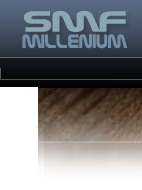
<style>
.page{position:relative;width:142px;height:190px}
.page>*{position:absolute;margin:0}
.t1{font:30.4px "Nasalization";color:#8ba7b2;scale:1.52 1}
.t2{font:20.3px "Nasalization";color:#738fa7;scale:0.91 1}
</style>
<div class="page">
<p class="t1" style="left:24px;top:11px;width:102px;height:21px">SMF</p>
<p class="t2" style="left:22px;top:34px;width:105px;height:15px">Millenium</p>
</div>
